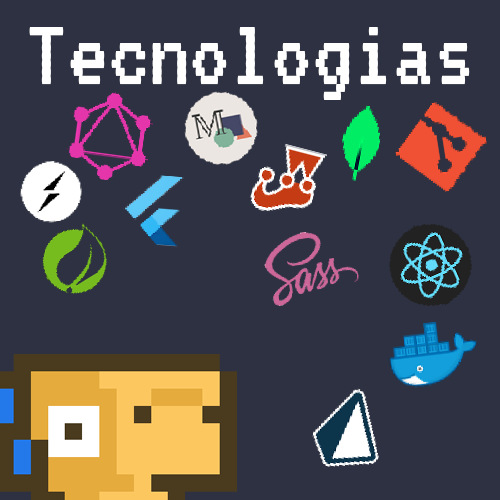
<style>
.page{position:relative;width:500px;height:500px;background:#2d3142}
.page>*{position:absolute;margin:0}
.t1{font:102px "VT323-Regular";color:#ffffff}
</style>
<div class="page">
<p class="t1" style="left:29px;top:27px;width:441px;height:73px">Tecnologias</p>
</div>
